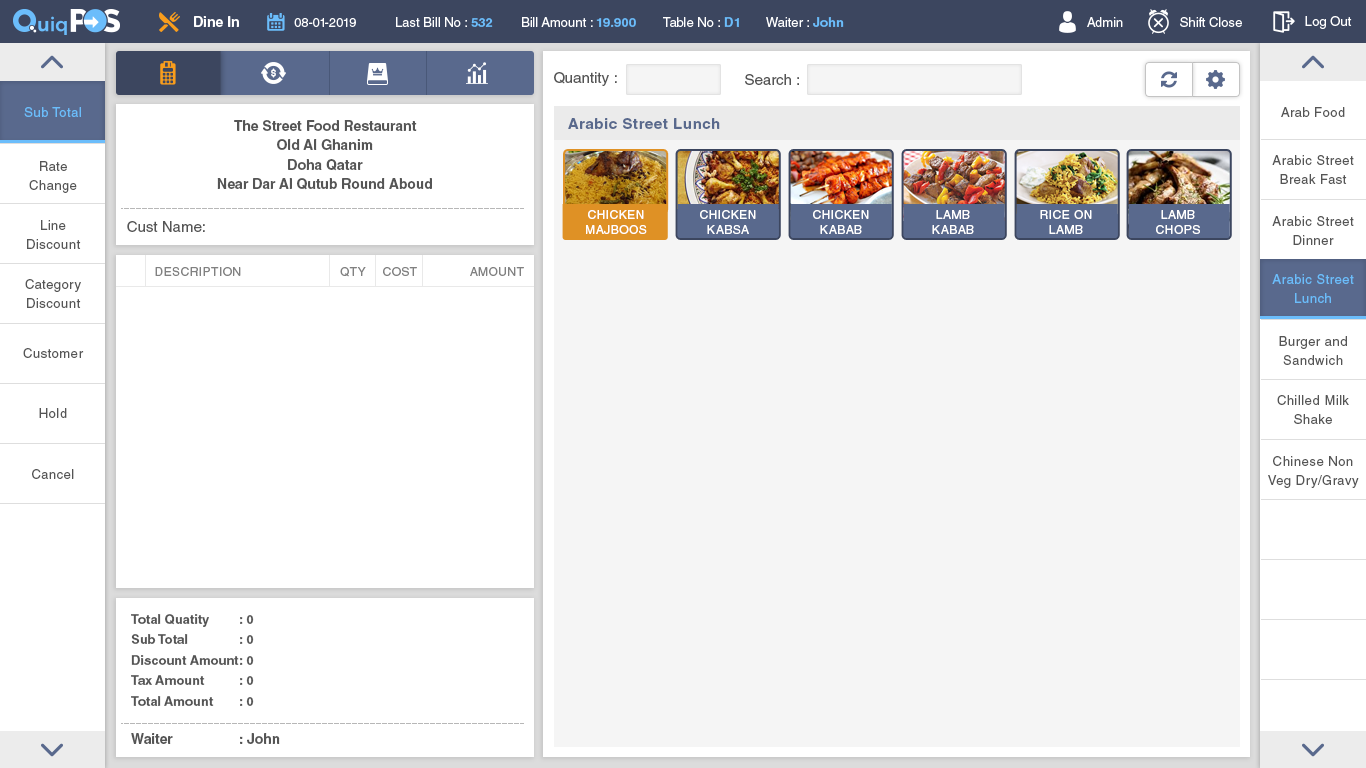
<style>
.page{position:relative;width:1366px;height:768px;background:#ffffff}
.page>*{position:absolute;margin:0}
.t1{font:14px "HelveticaLTStd-Bold";color:#ffffff}
.t2{font:13px "HelveticaLTStd-Roman";color:#ffffff}
.t3{font:13px "HelveticaLTStd-Bold";color:#6bbdfb}
.t4{font:15px "HelveticaLTStd-Roman";color:#555555}
.t5{font:13px "HelveticaLTStd-Roman";letter-spacing:0.04em;color:#6bbdfb}
.t6{font:13px "HelveticaLTStd-Roman";letter-spacing:0.04em;color:#555555}
.t7{font:14px/19.4px "HelveticaLTStd-Bold";color:#555555}
.t8{font:15px "HelveticaLTStd-Bold";letter-spacing:0.04em;color:#59698d}
.t9{font:13px/19.4px "HelveticaLTStd-Roman";letter-spacing:0.04em;color:#555555}
.t10{font:12px/15.4px "HelveticaLTStd-Roman";letter-spacing:0.04em;color:#ffffff;text-transform:uppercase}
.t11{font:12px "HelveticaLTStd-Roman";letter-spacing:0.04em;color:#818181;text-transform:uppercase}
.t12{font:13px/19.4px "HelveticaLTStd-Roman";letter-spacing:0.04em;color:#6bbdfb}
.t13{font:13px/20.4px "HelveticaLTStd-Bold";color:#555555}
.t14{font:14px "HelveticaLTStd-Bold";color:#555555}
</style>
<div class="page">
<p class="t1" style="left:194px;top:16px;width:45px;height:11px">Dine In</p>
<p class="t2" style="left:396px;top:17px;width:97px;height:10px">Last Bill No : <span class="t3">532</span></p>
<p class="t2" style="left:522px;top:17px;width:114px;height:10px">Bill Amount : <span class="t3">19.900</span></p>
<p class="t2" style="left:663px;top:17px;width:76px;height:10px">Table No : <span class="t3">D1</span></p>
<p class="t2" style="left:766px;top:17px;width:78px;height:10px">Waiter : <span class="t3">John</span></p>
<p class="t2" style="left:1087px;top:17px;width:36px;height:10px">Admin</p>
<p class="t2" style="left:1180px;top:17px;width:62px;height:10px">Shift Close</p>
<p class="t2" style="left:1305px;top:16px;width:47px;height:13px">Log Out</p>
<p class="t2" style="left:294px;top:18px;width:62px;height:9px">08-01-2019</p>
<p class="t4" style="left:554px;top:72px;width:63px;height:14px">Quantity :</p>
<p class="t4" style="left:745px;top:74px;width:54px;height:11px">Search :</p>
<p class="t5" style="left:24px;top:107px;width:57px;height:10px">Sub Total</p>
<p class="t6" style="left:1281px;top:107px;width:64px;height:10px">Arab Food</p>
<p class="t7" style="left:217px;top:120px;width:215px;height:70px;text-align:center">The Street Food Restaurant<br>Old Al Ghanim<br>Doha Qatar<br>Near Dar Al Qutub Round Aboud</p>
<p class="t8" style="left:568px;top:118px;width:152px;height:11px">Arabic Street Lunch</p>
<p class="t9" style="left:29px;top:161px;width:48px;height:32px;text-align:center">Rate<br>Change</p>
<p class="t9" style="left:1272px;top:155px;width:82px;height:29px;text-align:center">Arabic Street<br>Break Fast</p>
<p class="t9" style="left:27px;top:220px;width:54px;height:29px;text-align:center">Line<br>Discount</p>
<p class="t4" style="left:127px;top:221px;width:78px;height:11px">Cust Name:</p>
<p class="t10" style="left:586px;top:210px;width:61px;height:24px;text-align:center">Chicken<br>Majboos</p>
<p class="t10" style="left:700px;top:210px;width:56px;height:24px;text-align:center">Chicken<br>Kabsa</p>
<p class="t10" style="left:813px;top:210px;width:56px;height:24px;text-align:center">Chicken<br>Kabab</p>
<p class="t10" style="left:932px;top:210px;width:42px;height:24px;text-align:center">Lamb<br>Kabab</p>
<p class="t10" style="left:1040px;top:210px;width:52px;height:24px;text-align:center">Rice on<br>Lamb</p>
<p class="t10" style="left:1156px;top:210px;width:44px;height:24px;text-align:center">Lamb<br>Chops</p>
<p class="t9" style="left:1272px;top:216px;width:82px;height:29px;text-align:center">Arabic Street<br>Dinner</p>
<p class="t11" style="left:155px;top:267px;width:86px;height:9px">Description</p>
<p class="t11" style="left:340px;top:267px;width:26px;height:10px">QTY</p>
<p class="t11" style="left:383px;top:267px;width:34px;height:9px">Cost</p>
<p class="t11" style="left:470px;top:267px;width:54px;height:9px">Amount</p>
<p class="t9" style="left:25px;top:279px;width:56px;height:29px;text-align:center">Category<br>Discount</p>
<p class="t12" style="left:1272px;top:274px;width:82px;height:29px;text-align:center">Arabic Street<br>Lunch</p>
<p class="t9" style="left:1279px;top:336px;width:68px;height:29px;text-align:center">Burger and<br>Sandwich</p>
<p class="t6" style="left:23px;top:348px;width:61px;height:10px">Customer</p>
<p class="t9" style="left:1277px;top:395px;width:72px;height:29px;text-align:center">Chilled Milk<br>Shake</p>
<p class="t6" style="left:39px;top:408px;width:28px;height:10px">Hold</p>
<p class="t9" style="left:1268px;top:456px;width:91px;height:32px;text-align:center">Chinese Non<br>Veg Dry/Gravy</p>
<p class="t6" style="left:32px;top:469px;width:42px;height:10px">Cancel</p>
<p class="t13" style="left:131px;top:614px;width:123px;height:92px">Total Quatity : 0<br>Sub Total  : 0<br>Discount Amount : 0<br>Tax Amount : 0<br>Total Amount : 0</p>
<p class="t14" style="left:131px;top:733px;width:149px;height:11px">Waiter   : John</p>
</div>
